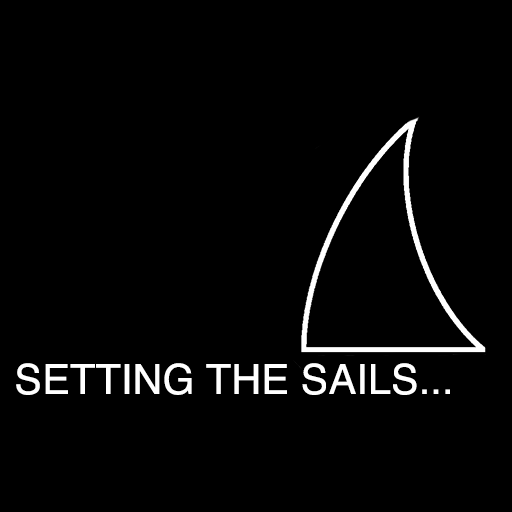
<style>
.page{position:relative;width:512px;height:512px;background:#000000}
.page>*{position:absolute;margin:0}
.t1{font:41.7px "Helvetica";color:#ffffff}
</style>
<div class="page">
<p class="t1" style="left:16px;top:363px;width:434px;height:32px">SETTING THE SAILS...</p>
</div>
